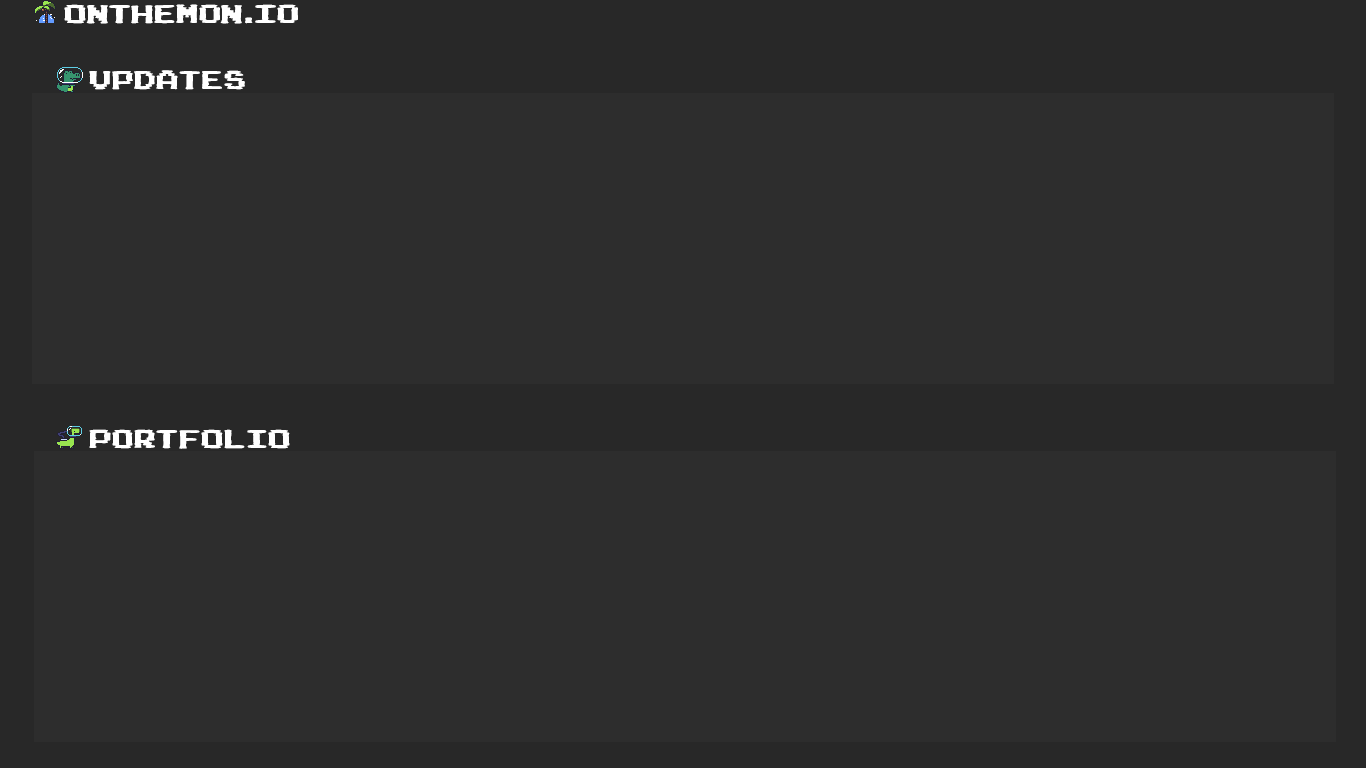
<style>
.page{position:relative;width:1366px;height:768px;background:#2d2d2d}
.page>*{position:absolute;margin:0}
.t1{font:28px "CCPixelArcade-Display";color:#ffffff}
</style>
<div class="page">
<p class="t1" style="left:64px;top:4px;width:234px;height:20px">onthemon.io</p>
<p class="t1" style="left:89px;top:70px;width:156px;height:20px">Updates</p>
<p class="t1" style="left:89px;top:429px;width:201px;height:20px">Portfolio</p>
</div>
